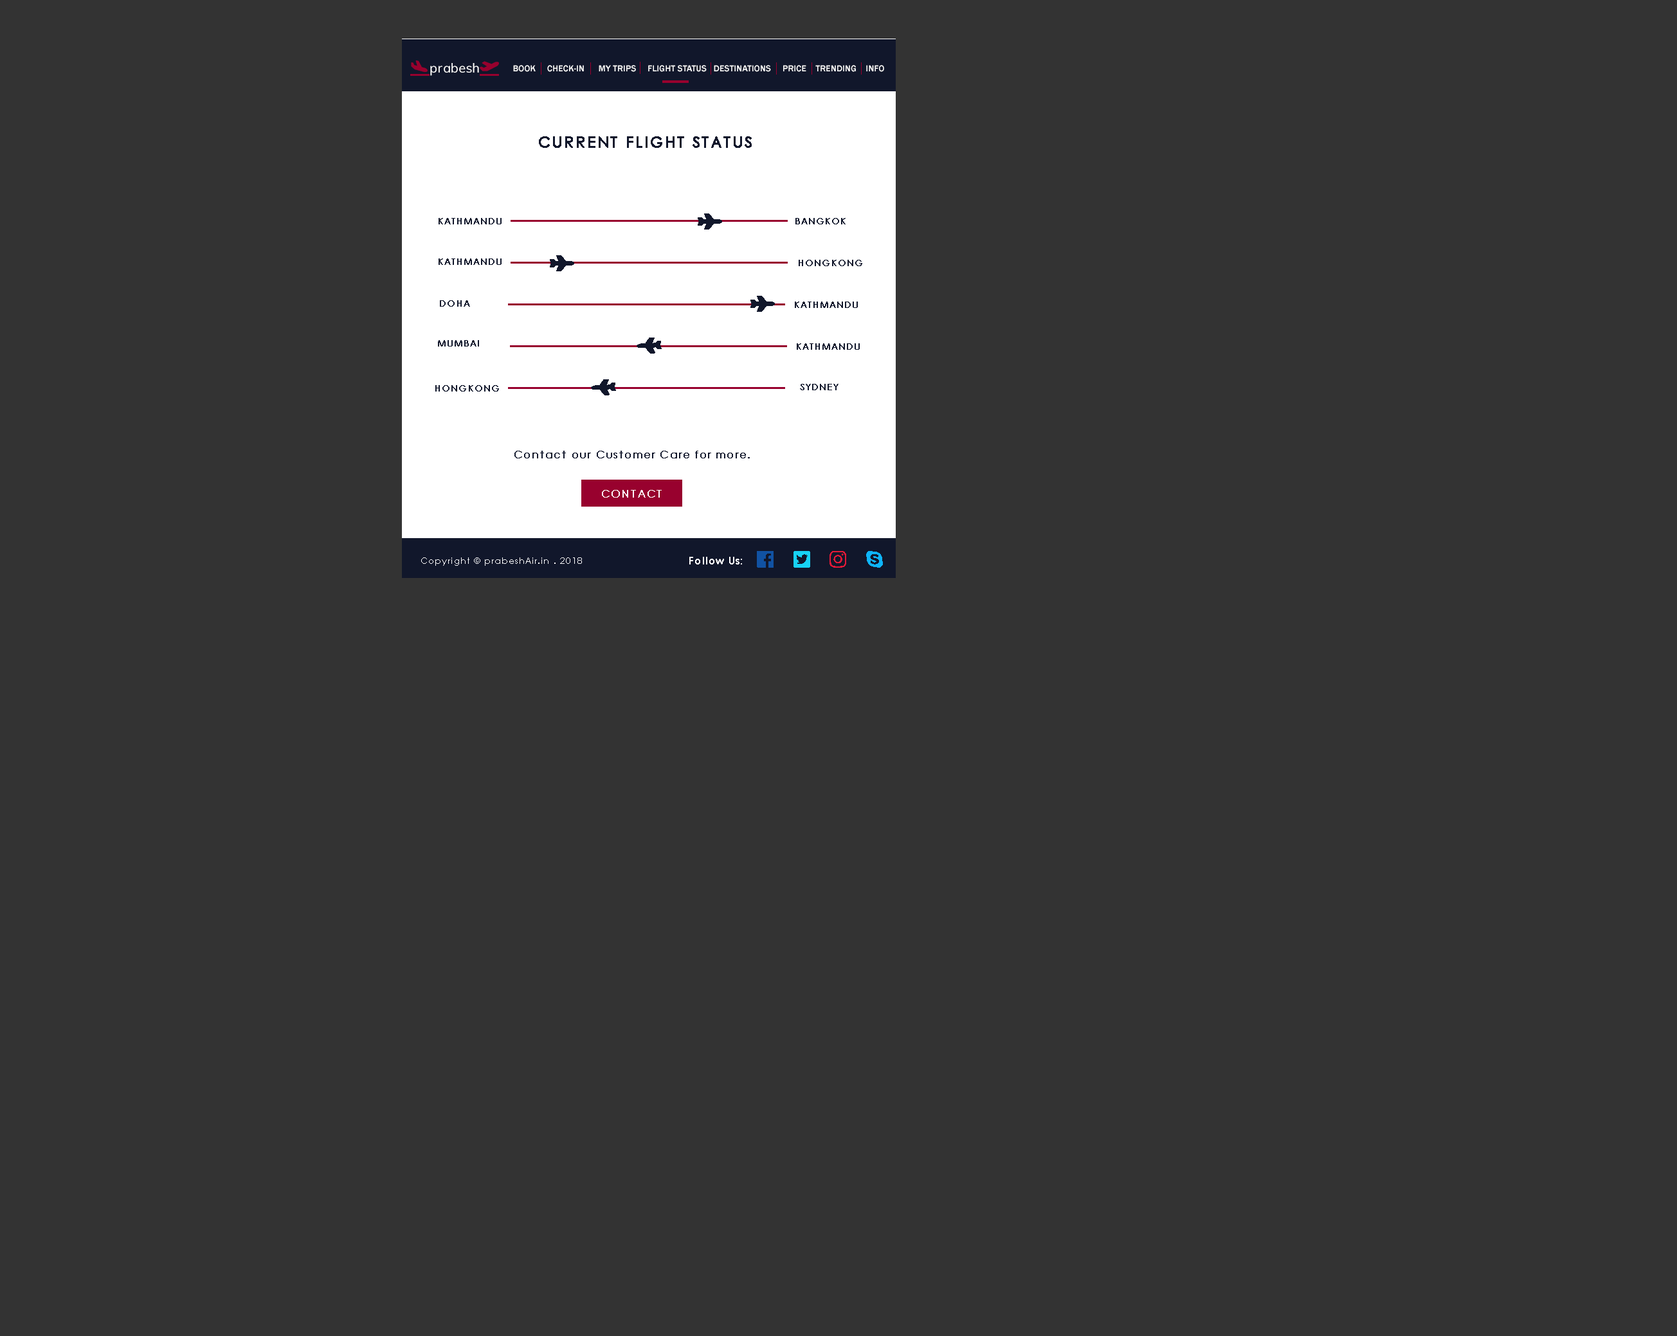
<style>
.page{position:relative;width:1677px;height:1336px;background:#333333}
.page>*{position:absolute;margin:0}
.t1{font:9px "FranklinGothic-Medium";letter-spacing:0.005em;color:#ffffff}
.t2{font:15.4px "CenturyGothic";letter-spacing:0.075em;color:#11172b;font-weight:bold}
.t3{font:9px "CenturyGothic";letter-spacing:0.075em;color:#11172b;font-weight:bold}
.t4{font:10.3px "CenturyGothic";letter-spacing:0.075em;color:#11172b;font-weight:bold}
.t5{font:10.3px "CenturyGothic";letter-spacing:0.075em;color:#ffffff;font-weight:bold}
.t6{font:9px "CenturyGothic";letter-spacing:0.075em;color:#ffffff}
.t7{font:10.3px "CenturyGothic-Bold";letter-spacing:0.075em;color:#ffffff}
</style>
<div class="page">
<p class="t1" style="left:513px;top:65px;width:371px;height:7px">BOOK     CHECK-IN      MY TRIPS     FLIGHT STATUS   DESTINATIONS     PRICE    TRENDING    INFO</p>
<p class="t2" style="left:539px;top:136px;width:213px;height:12px">CURRENT FLIGHT STATUS</p>
<p class="t3" style="left:438px;top:218px;width:63px;height:6px">KATHMANDU</p>
<p class="t3" style="left:795px;top:218px;width:50px;height:6px">BANGKOK</p>
<p class="t3" style="left:438px;top:258px;width:63px;height:7px">KATHMANDU</p>
<p class="t3" style="left:798px;top:260px;width:64px;height:6px">HONGKONG</p>
<p class="t3" style="left:440px;top:300px;width:30px;height:7px">DOHA</p>
<p class="t3" style="left:795px;top:302px;width:63px;height:6px">KATHMANDU</p>
<p class="t3" style="left:438px;top:340px;width:41px;height:6px">MUMBAI</p>
<p class="t3" style="left:797px;top:343px;width:63px;height:7px">KATHMANDU</p>
<p class="t3" style="left:435px;top:385px;width:64px;height:7px">HONGKONG</p>
<p class="t3" style="left:800px;top:384px;width:38px;height:6px">SYDNEY</p>
<p class="t4" style="left:514px;top:451px;width:236px;height:7px">Contact our Customer Care for more.</p>
<p class="t5" style="left:602px;top:490px;width:60px;height:8px">CONTACT</p>
<p class="t6" style="left:421px;top:557px;width:161px;height:9px">Copyright © prabeshAir.in . 2018</p>
<p class="t7" style="left:689px;top:557px;width:53px;height:7px">Follow Us:</p>
</div>
